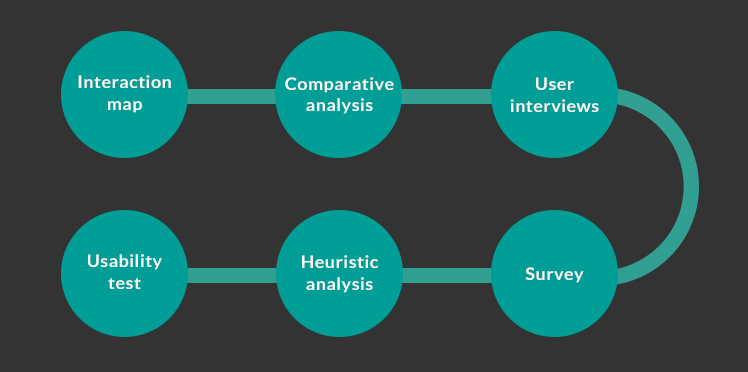
<style>
.page{position:relative;width:748px;height:372px;background:#333333}
.page>*{position:absolute;margin:0}
.t1{font:17.1px "Lato-Bold";letter-spacing:0.025em;color:#f6f6f6;scale:1.05 1}
</style>
<div class="page">
<p class="t1" style="left:78px;top:75px;width:93px;height:38px;text-align:center">Interaction<br>map</p>
<p class="t1" style="left:285px;top:77px;width:109px;height:37px;text-align:center">Comparative<br>analysis</p>
<p class="t1" style="left:510px;top:77px;width:89px;height:35px;text-align:center">User interviews</p>
<p class="t1" style="left:88px;top:254px;width:74px;height:35px;text-align:center">Usability<br>test</p>
<p class="t1" style="left:302px;top:255px;width:76px;height:38px;text-align:center">Heuristic<br>analysis</p>
<p class="t1" style="left:525px;top:267px;width:59px;height:16px">Survey</p>
</div>
